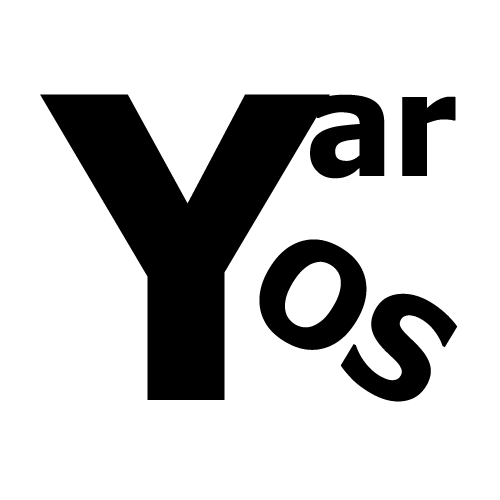
<style>
.page{position:relative;width:500px;height:500px;background:#ffffff}
.page>*{position:absolute;margin:0}
.t1{font:420px "Tahoma-Bold";color:#000000}
.t2{font:144px "Tahoma-Bold";color:#000000}
</style>
<div class="page">
<p class="t1" style="left:40px;top:94px;width:290px;height:306px">Y</p>
<p class="t2" style="left:310px;top:94px;width:146px;height:85px">ar</p>
<p class="t2" style="left:259px;top:239px;width:199px;height:163px;rotate:31deg">OS</p>
</div>
